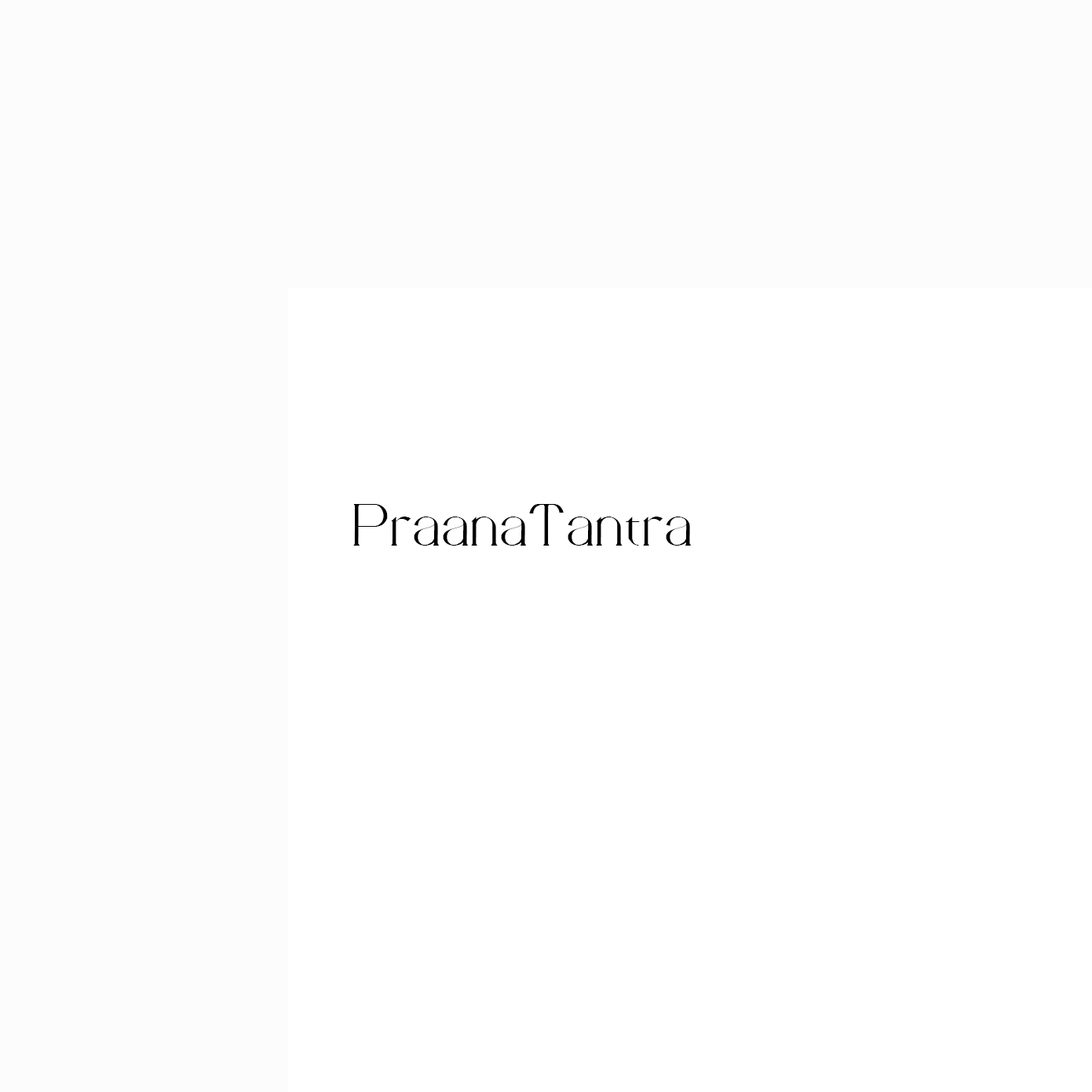
<style>
.page{position:relative;width:1092px;height:1092px;background:#ffffff}
.page>*{position:absolute;margin:0}
.t1{font:75.4px "Vilaka-Modern-Serif-Font-Demo!";color:#000000}
</style>
<div class="page">
<p class="t1" style="left:353px;top:504px;width:339px;height:42px">PraanaTantra</p>
</div>
